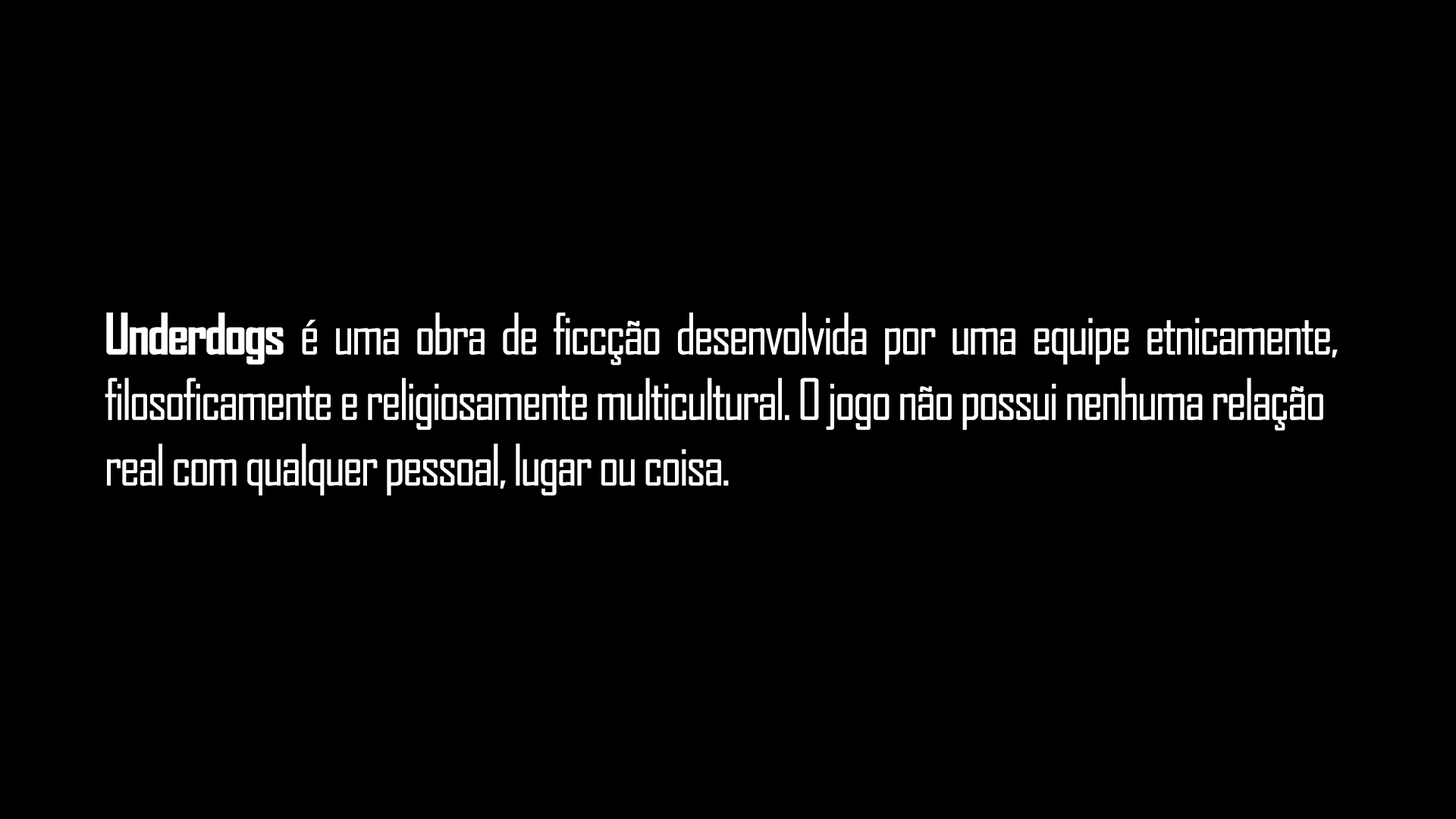
<style>
.page{position:relative;width:1456px;height:819px;background:#000000}
.page>*{position:absolute;margin:0}
.t1{font:54.6px "AgencyFB-Reg";letter-spacing:-0.045em;color:#ffffff}
.t2{font:54.6px "AgencyFB-Bold";letter-spacing:-0.045em;color:#ffffff}
</style>
<div class="page">
<p class="t1" style="left:105px;top:312px;width:1233px;height:184px;text-align:justify"><span class="t2">Underdogs </span>é uma obra de ficcção desenvolvida por uma equipe etnicamente, filosoficamente e religiosamente multicultural. O jogo não possui nenhuma relação <br>real com qualquer pessoal, lugar ou coisa.</p>
</div>
